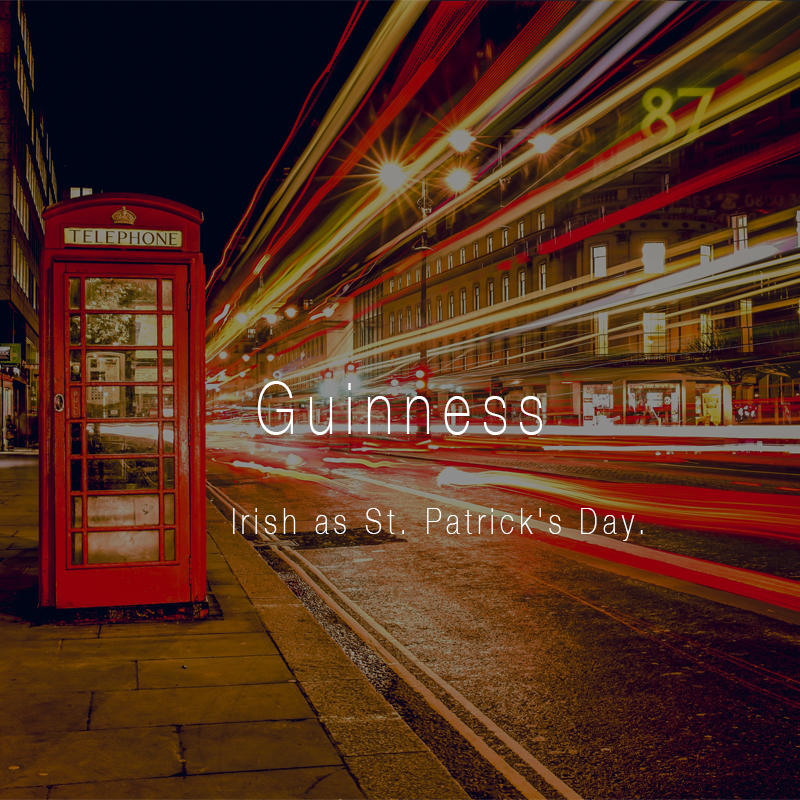
<style>
.page{position:relative;width:800px;height:800px}
.page>*{position:absolute;margin:0}
.t1{font:72px "HelveticaNeue-Thin";letter-spacing:0.2em;color:#ffffff;scale:0.75 1}
.t2{font:36px "HelveticaNeue-Thin";letter-spacing:0.2em;color:#ffffff;scale:0.75 1}
</style>
<div class="page">
<p class="t1" style="left:257px;top:381px;width:286px;height:54px">Guinness</p>
<p class="t2" style="left:233px;top:508px;width:410px;height:33px">Irish as St. Patrick's Day.</p>
</div>
